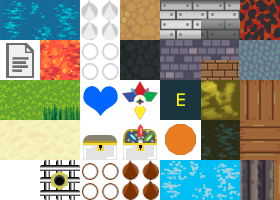
<style>
.page{position:relative;width:280px;height:200px}
.page>*{position:absolute;margin:0}
.t1{font:18.7px "Skia-Regular";color:#fff200}
</style>
<div class="page">
<p class="t1" style="left:177px;top:93px;width:8px;height:13px">E</p>
</div>
